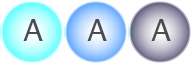
<style>
.page{position:relative;width:192px;height:64px;background:#ffffff}
.page>*{position:absolute;margin:0}
.t1{font:30px "Helvetica";letter-spacing:0.2em;color:#4b4b50;text-transform:uppercase}
</style>
<div class="page">
<p class="t1" style="left:23px;top:19px;width:20px;height:22px">a</p>
<p class="t1" style="left:87px;top:19px;width:20px;height:22px">a</p>
<p class="t1" style="left:151px;top:19px;width:20px;height:22px">a</p>
</div>
